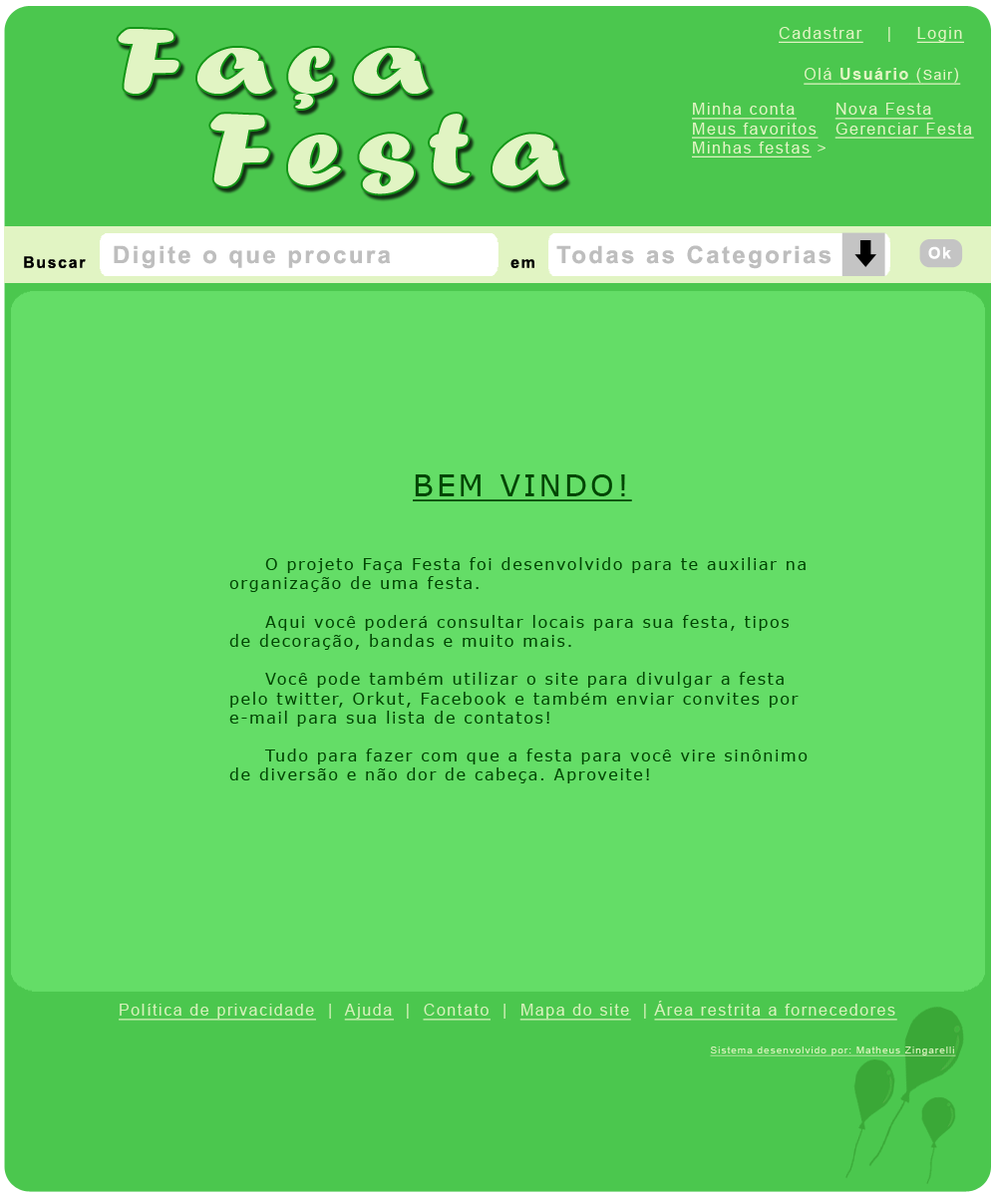
<style>
.page{position:relative;width:997px;height:1196px;background:#64dd67}
.page>*{position:absolute;margin:0}
.t1{font:99.8px "ForteMT";letter-spacing:0.1em;color:#e1f4c3;scale:1.38 1}
.t2{font:15.9px "ArialMT";letter-spacing:0.1em;color:#e1f4c3;text-decoration:underline}
.t3{font:15.9px "ArialMT";letter-spacing:0.1em;color:#e1f4c3}
.t4{font:15.9px "Arial-BoldMT";letter-spacing:0.1em;color:#e1f4c3;text-decoration:underline}
.t5{font:14px "ArialMT";letter-spacing:0.1em;color:#e1f4c3;text-decoration:underline}
.t6{font:108.4px "ForteMT";letter-spacing:0.1em;color:#e1f4c3;scale:1.24 1}
.t7{font:23.9px "Arial-BoldMT";letter-spacing:0.1em;color:#bebebe}
.t8{font:15.9px "Arial-BoldMT";letter-spacing:0.1em;color:#000000}
.t9{font:15.9px "Arial-BoldMT";letter-spacing:0.1em;color:#ffffff}
.t10{font:15.9px "Verdana";letter-spacing:0.1em;color:#014603}
.t11{font:29.9px "Verdana";letter-spacing:0.1em;color:#014603;text-decoration:underline}
.t12{font:15.9px "ArialMT";letter-spacing:0.1em;color:#d7f1bb;text-decoration:underline}
.t13{font:15.9px "ArialMT";letter-spacing:0.1em;color:#d7f1bb}
.t14{font:10px "ArialMT";letter-spacing:0.1em;color:#d7f1bb;text-decoration:underline}
</style>
<div class="page">
<p class="t1" style="left:118px;top:29px;width:311px;height:80px">Faça</p>
<p class="t2" style="left:779px;top:27px;width:185px;height:16px">Cadastrar<span class="t3">    |    </span>Login</p>
<p class="t4" style="left:803px;top:68px;width:158px;height:17px"><span class="t2">Olá </span>Usuário<span class="t2"> (</span><span class="t5">Sair</span><span class="t2">)</span></p>
<p class="t6" style="left:210px;top:114px;width:355px;height:80px">Festa</p>
<p class="t2" style="left:692px;top:103px;width:133px;height:55px">Minha conta<br>Meus favoritos<br>Minhas festas<span class="t3"> &gt;</span></p>
<p class="t2" style="left:834px;top:103px;width:140px;height:36px">Nova Festa<br>Gerenciar Festa</p>
<p class="t7" style="left:114px;top:245px;width:277px;height:24px">Digite o que procura</p>
<p class="t7" style="left:556px;top:245px;width:275px;height:24px">Todas as Categorias</p>
<p class="t8" style="left:24px;top:256px;width:62px;height:12px">Buscar</p>
<p class="t9" style="left:928px;top:246px;width:23px;height:13px">Ok</p>
<p class="t8" style="left:510px;top:259px;width:24px;height:9px">em</p>
<p class="t10" style="left:229px;top:474px;width:578px;height:310px;text-align:center"><span class="t11">BEM VINDO!<br><br><br></span> O projeto Faça Festa foi desenvolvido para te auxiliar na organização de uma festa.<br><br> Aqui você poderá consultar locais para sua festa, tipos de decoração, bandas e muito mais.<br><br> Você pode também utilizar o site para divulgar a festa pelo twitter, Orkut, Facebook e também enviar convites por e-mail para sua lista de contatos!<br><br> Tudo para fazer com que a festa para você vire sinônimo de diversão e não dor de cabeça. Aproveite!</p>
<p class="t12" style="left:119px;top:1001px;width:778px;height:20px">Política de privacidade<span class="t13">  |  </span>Ajuda<span class="t13">  |  </span>Contato<span class="t13">  |  </span>Mapa do site<span class="t13">  | </span>Área restrita a fornecedores</p>
<p class="t14" style="left:710px;top:1047px;width:246px;height:10px">Sistema desenvolvido por: Matheus Zingarelli</p>
</div>
